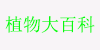
<style>
.page{position:relative;width:100px;height:50px;background:#f8f4f7}
.page>*{position:absolute;margin:0}
.t1{font:18px "SimSun";color:#08fb0e}
</style>
<div class="page">
<p class="t1" style="left:5px;top:16px;width:90px;height:17px">植物大百科</p>
</div>
